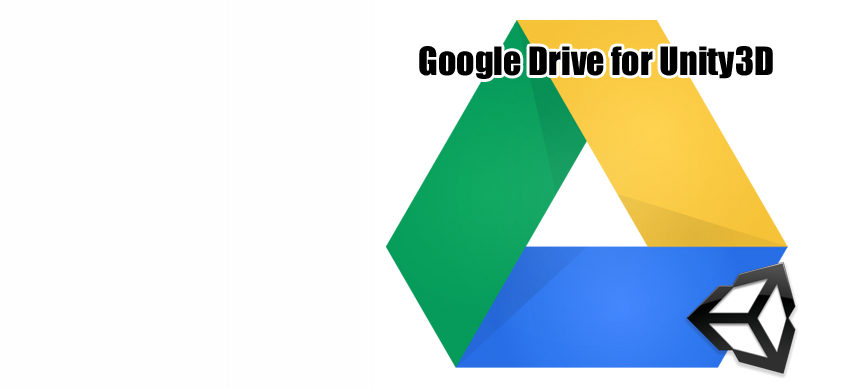
<style>
.page{position:relative;width:860px;height:389px;background:#fefefe}
.page>*{position:absolute;margin:0}
.t1{font:36px "Impact";color:#000000}
</style>
<div class="page">
<p class="t1" style="left:419px;top:46px;width:354px;height:33px">Google Drive for Unity3D</p>
</div>
